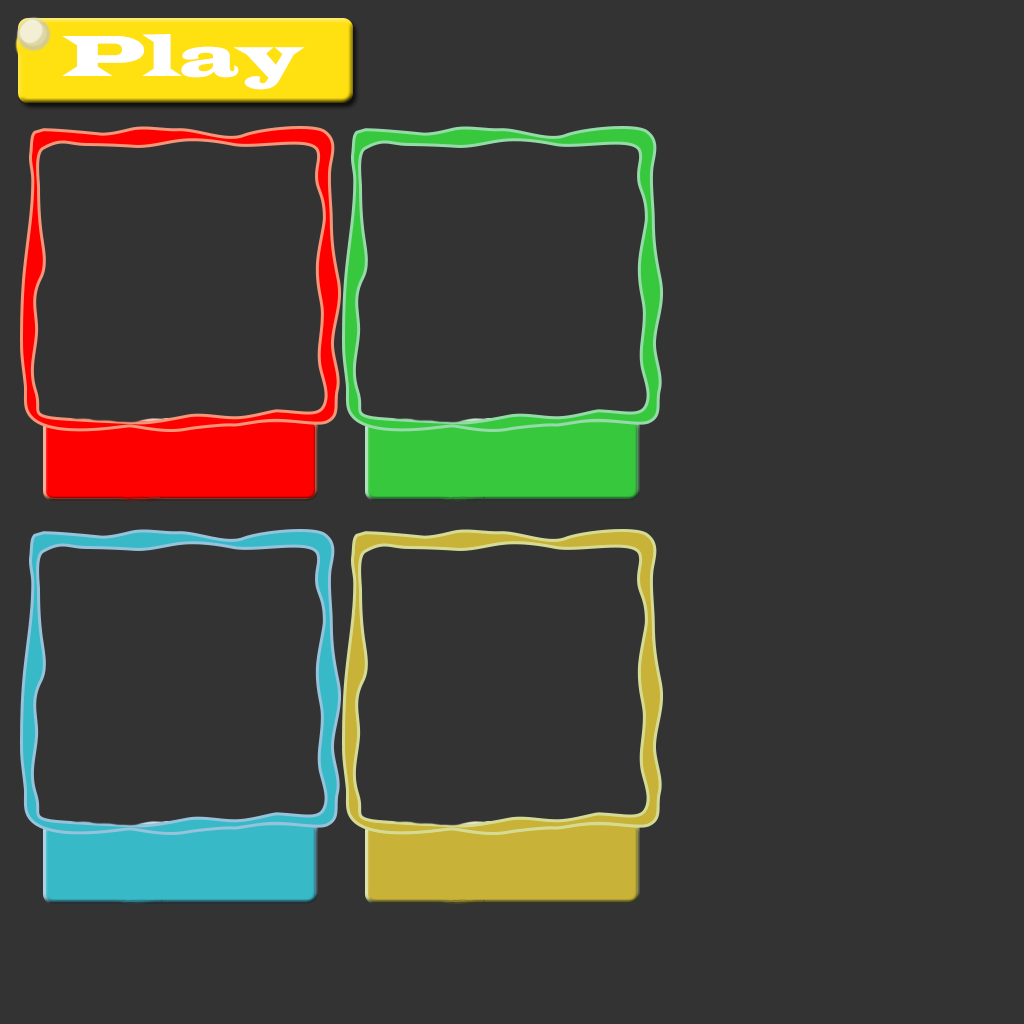
<style>
.page{position:relative;width:1024px;height:1024px;background:#333333}
.page>*{position:absolute;margin:0}
.t1{font:60px "LatinWide";color:#ffffff}
</style>
<div class="page">
<p class="t1" style="left:62px;top:34px;width:243px;height:56px">Play</p>
</div>
